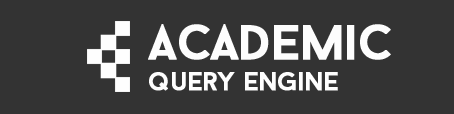
<style>
.page{position:relative;width:454px;height:114px;background:#333333}
.page>*{position:absolute;margin:0}
.t1{font:49px "BaronNeue";letter-spacing:-0.025em;color:#fdfdfd;font-weight:bold}
.t2{font:25.6px "BaronNeue";letter-spacing:-0.025em;color:#fefefe;font-weight:bold}
</style>
<div class="page">
<p class="t1" style="left:148px;top:24px;width:243px;height:36px">Academic</p>
<p class="t2" style="left:149px;top:72px;width:189px;height:19px">query engine</p>
</div>
